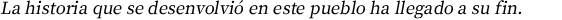
<style>
.page{position:relative;width:562px;height:20px;background:#ffffff}
.page>*{position:absolute;margin:0}
.t1{font:20px "OfficialFateFont-Medium";color:#000000;font-style:italic}
</style>
<div class="page">
<p class="t1" style="left:0px;top:0px;width:522px;height:19px">La historia que se desenvolvió en este pueblo ha llegado a su fin.</p>
</div>
